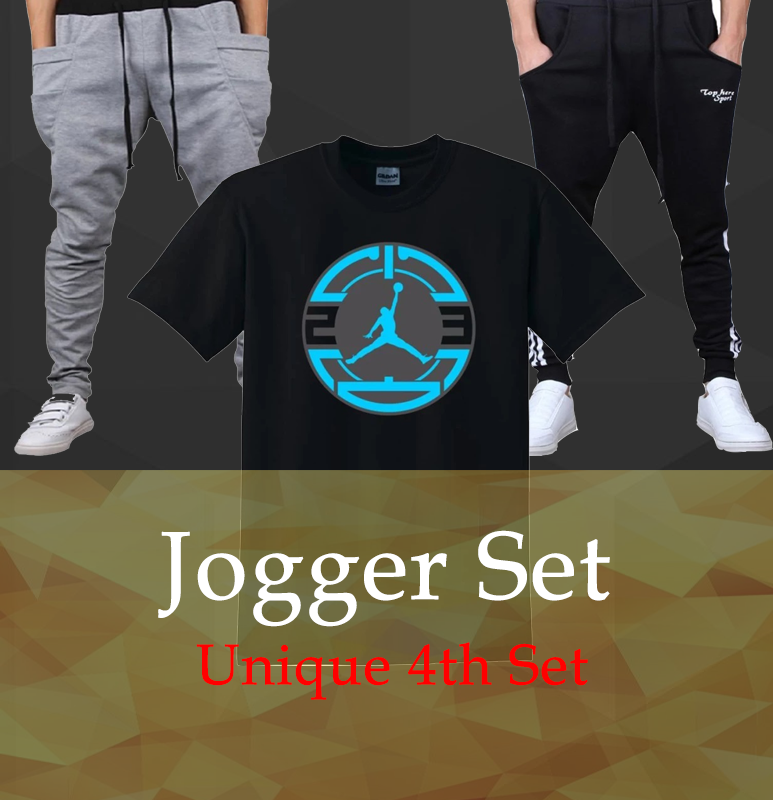
<style>
.page{position:relative;width:773px;height:800px}
.page>*{position:absolute;margin:0}
.t1{font:96px "BookAntiqua";color:#ffffff;font-weight:bold}
.t2{font:57px "BookAntiqua";color:#ff0000;font-weight:bold}
</style>
<div class="page">
<p class="t1" style="left:158px;top:530px;width:452px;height:97px">Jogger Set</p>
<p class="t2" style="left:196px;top:642px;width:392px;height:58px">Unique 4th Set</p>
</div>
